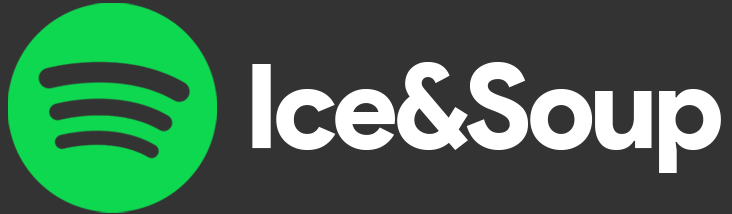
<style>
.page{position:relative;width:732px;height:214px;background:#333333}
.page>*{position:absolute;margin:0}
.t1{font:117.3px "ProductSans-Black";letter-spacing:-0.05em;color:#ffffff}
</style>
<div class="page">
<p class="t1" style="left:252px;top:62px;width:469px;height:111px">Ice&amp;Soup</p>
</div>
